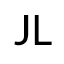
<style>
.page{position:relative;width:64px;height:64px;background:#ffffff}
.page>*{position:absolute;margin:0}
.t1{font:41.7px "Lato-Regular";color:#000000}
</style>
<div class="page">
<p class="t1" style="left:14px;top:15px;width:38px;height:31px">JL</p>
</div>
